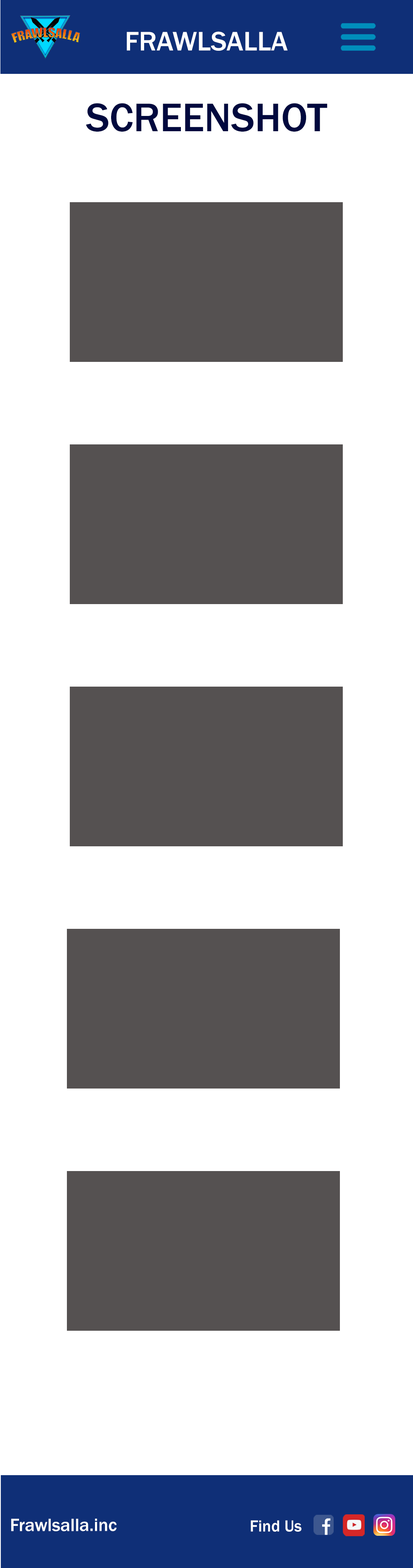
<style>
.page{position:relative;width:413px;height:1568px;background:#ffffff}
.page>*{position:absolute;margin:0}
.t1{font:27.8px "FranklinGothic-Medium";color:#ffffff}
.t2{font:41.3px "FranklinGothic-Medium";color:#00093e}
.t3{font:18.4px "FranklinGothic-Medium";color:#ffffff}
.t4{font:16.7px "FranklinGothic-Medium";color:#ffffff}
</style>
<div class="page">
<p class="t1" style="left:127px;top:31px;width:161px;height:20px">FRAWLSALLA</p>
<p class="t2" style="left:86px;top:103px;width:241px;height:29px">SCREENSHOT</p>
<p class="t3" style="left:11px;top:1518px;width:106px;height:13px">Frawlsalla.inc</p>
<p class="t4" style="left:250px;top:1520px;width:51px;height:12px">Find Us</p>
</div>
